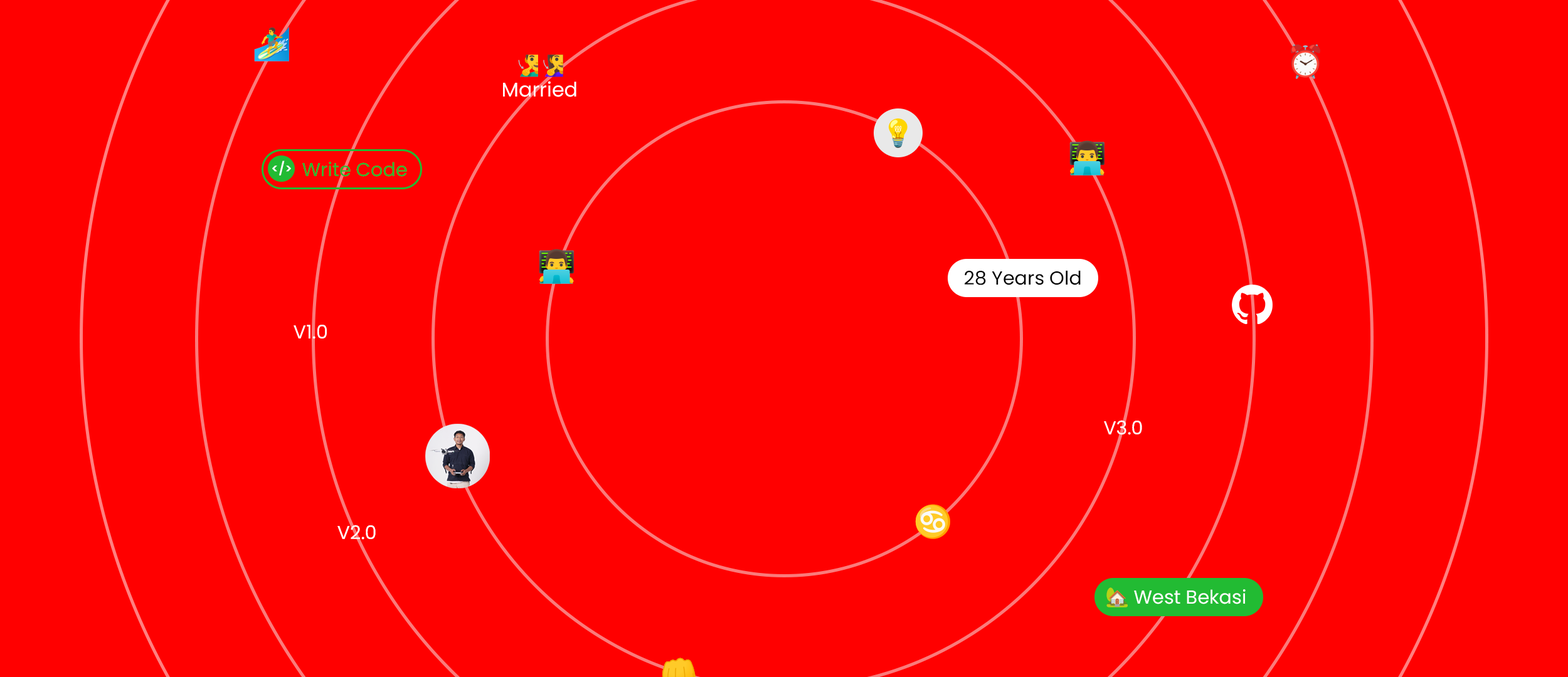
<style>
.page{position:relative;width:1568px;height:677px;background:#ff0000}
.page>*{position:absolute;margin:0}
.t1{font:12.7px "Poppins-SemiBold";color:#ffffff}
.t2{font:18.9px "Poppins-Regular";color:#22bb33}
.t3{font:18.9px "Poppins-Regular";color:#000000}
.t4{font:18.9px "Poppins-Regular";color:#ffffff}
</style>
<div class="page">
<p class="t1" style="left:272px;top:161px;width:19px;height:15px">&lt;/&gt;</p>
<p class="t2" style="left:302px;top:162px;width:105px;height:15px">Write Code</p>
<p class="t3" style="left:965px;top:270px;width:116px;height:15px">28 Years Old</p>
<p class="t4" style="left:294px;top:325px;width:33px;height:14px">V1.0</p>
<p class="t4" style="left:1104px;top:420px;width:38px;height:15px">V3.0</p>
<p class="t4" style="left:337px;top:525px;width:39px;height:15px">V2.0</p>
<p class="t4" style="left:1134px;top:590px;width:112px;height:15px">West Bekasi</p>
</div>
